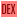
<style>
.page{position:relative;width:19px;height:19px;background:#ff7f7f}
.page>*{position:absolute;margin:0}
.t1{font:14px "Tungsten-Medium";color:#800000;text-transform:uppercase}
</style>
<div class="page">
<p class="t1" style="left:2px;top:4px;width:14px;height:10px">Dex</p>
</div>
